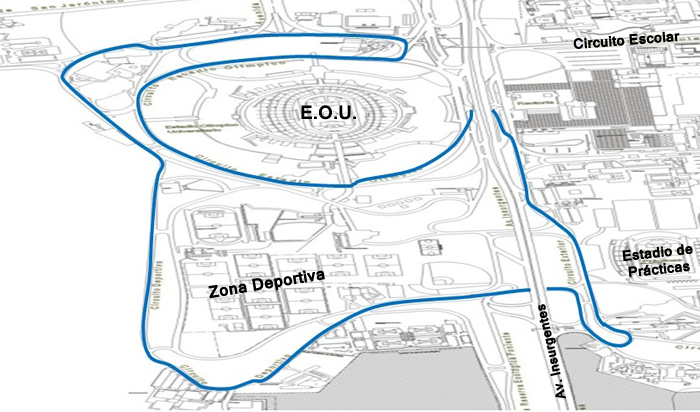
<style>
.page{position:relative;width:700px;height:412px;background:#ffffff}
.page>*{position:absolute;margin:0}
.t1{font:14px "Kartika-Bold";color:#030000}
.t2{font:18px "Kartika-Bold";color:#030000}
.t3{font:16px "Kartika-Bold";color:#030000}
.t4{font:13px "Kartika-Bold";color:#030000}
</style>
<div class="page">
<p class="t1" style="left:573px;top:31px;width:107px;height:18px;rotate:-4deg">Circuito Escolar</p>
<p class="t2" style="left:301px;top:105px;width:55px;height:15px">E.O.U.</p>
<p class="t1" style="left:622px;top:244px;width:71px;height:34px;rotate:-6deg">Estadio de<br> Prácticas</p>
<p class="t3" style="left:208px;top:270px;width:117px;height:29px;rotate:-9deg">Zona Deportiva</p>
<p class="t4" style="left:538px;top:304px;width:28px;height:95px;rotate:-103deg">Av. Insurgentes</p>
</div>
